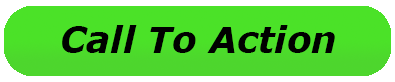
<style>
.page{position:relative;width:395px;height:82px;background:#4be228}
.page>*{position:absolute;margin:0}
.t1{font:36px "Verdana-BoldItalic";color:#000000}
</style>
<div class="page">
<p class="t1" style="left:62px;top:25px;width:273px;height:28px">Call To Action</p>
</div>
